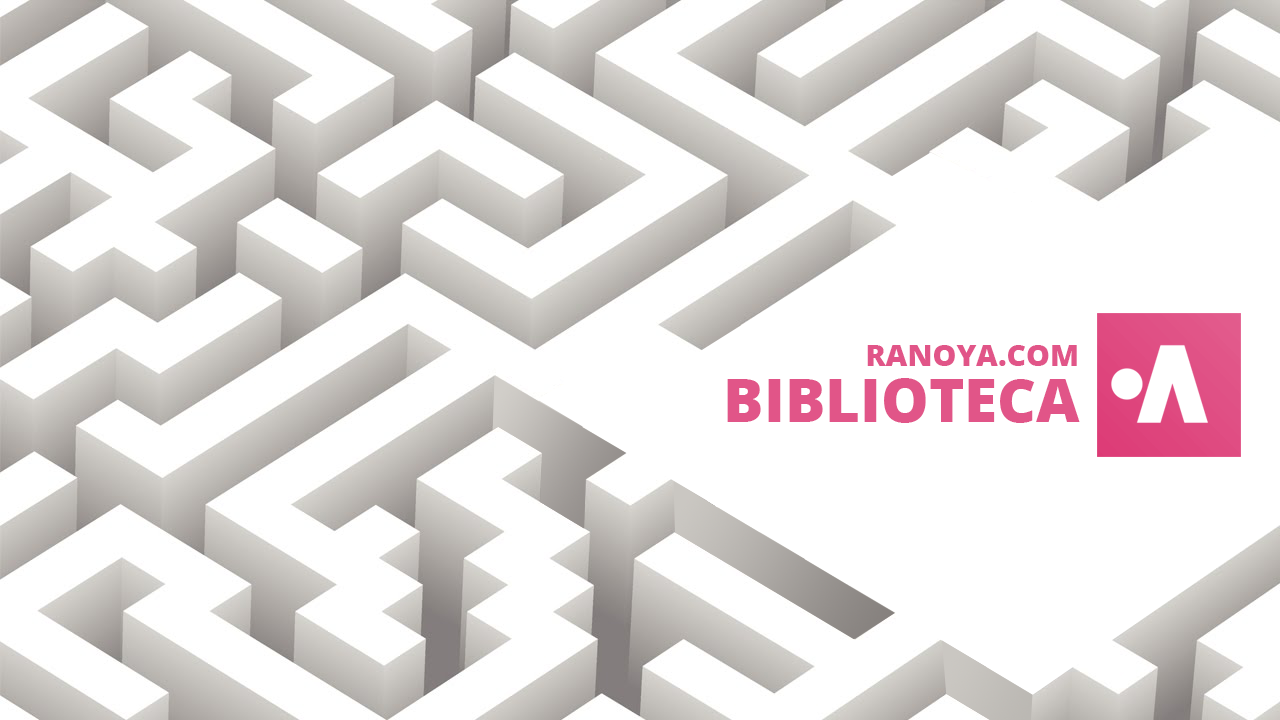
<style>
.page{position:relative;width:1280px;height:720px;background:#ffffff}
.page>*{position:absolute;margin:0}
.t1{font:30px "OpenSans-ExtraBold";color:#e15588}
.t2{font:60px "OpenSans-ExtraBold";color:#e15588}
</style>
<div class="page">
<p class="t1" style="left:867px;top:345px;width:210px;height:21px">RANOYA.COM</p>
<p class="t2" style="left:727px;top:378px;width:353px;height:45px">BIBLIOTECA</p>
</div>
